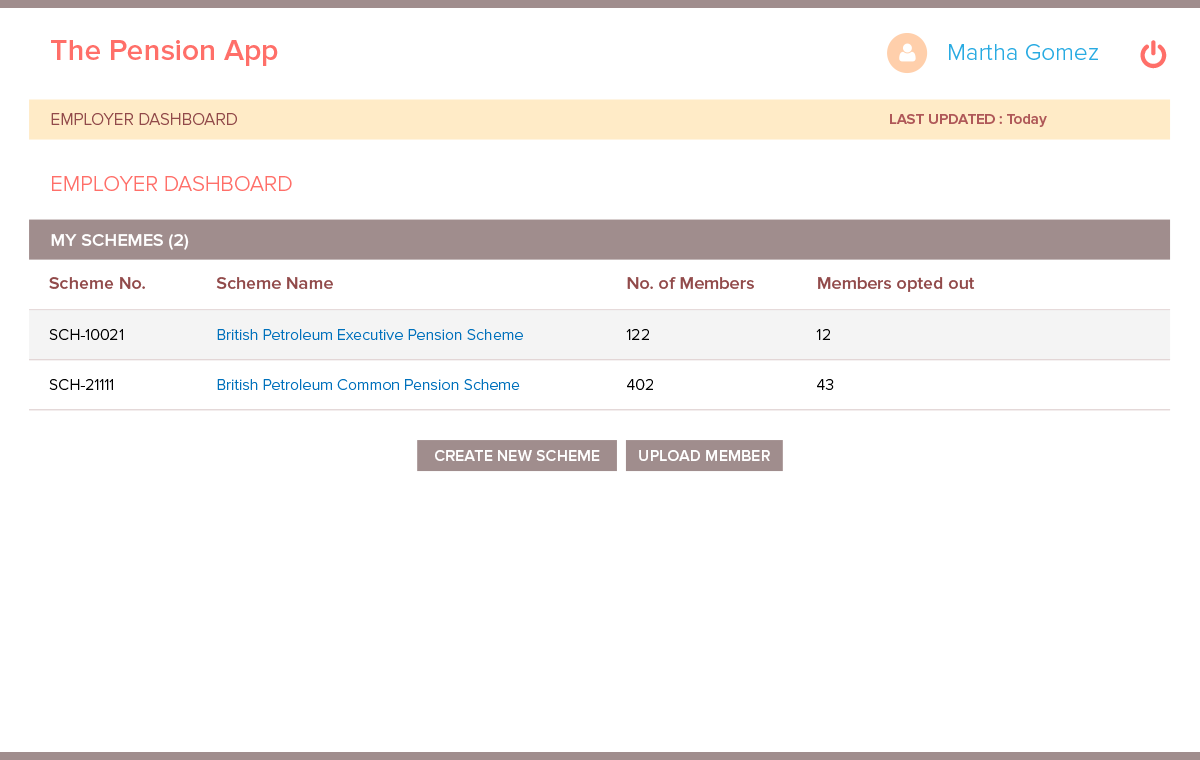
<style>
.page{position:relative;width:1200px;height:760px;background:#ffffff}
.page>*{position:absolute;margin:0}
.t1{font:30px "ProximaNova-Semibold";color:#ff6f69}
.t2{font:24px "ProximaNova-Light";color:#29abe2}
.t3{font:17px "ProximaNova-Light";color:#914a4a}
.t4{font:15px "ProximaNova-Semibold";color:#af5858}
.t5{font:22px "ProximaNova-Light";color:#ff6f69}
.t6{font:18px "ProximaNova-Semibold";color:#ffffff}
.t7{font:18px "ProximaNova-Semibold";color:#914a4a}
.t8{font:17.1px "ProximaNova-Semibold";color:#914a4a;scale:1.05 1}
.t9{font:16px "ProximaNova-Light";color:#000000}
.t10{font:16px "ProximaNova-Light";color:#0071bc}
.t11{font:16px "ProximaNova-Semibold";color:#ffffff}
</style>
<div class="page">
<p class="t1" style="left:51px;top:40px;width:227px;height:26px">The Pension App</p>
<p class="t2" style="left:949px;top:44px;width:149px;height:16px">Martha Gomez</p>
<p class="t3" style="left:51px;top:113px;width:186px;height:12px">EMPLOYER DASHBOARD</p>
<p class="t4" style="left:890px;top:114px;width:157px;height:13px">LAST UPDATED : Today</p>
<p class="t5" style="left:52px;top:176px;width:240px;height:15px">EMPLOYER DASHBOARD</p>
<p class="t6" style="left:51px;top:234px;width:138px;height:16px">MY SCHEMES (2)</p>
<p class="t7" style="left:49px;top:277px;width:96px;height:12px">Scheme No.</p>
<p class="t8" style="left:216px;top:277px;width:117px;height:12px">Scheme Name</p>
<p class="t8" style="left:627px;top:277px;width:127px;height:12px">No. of Members</p>
<p class="t8" style="left:818px;top:277px;width:157px;height:15px">Members opted out</p>
<p class="t9" style="left:49px;top:329px;width:74px;height:11px">SCH-10021</p>
<p class="t10" style="left:217px;top:329px;width:306px;height:11px">British Petroleum Executive Pension Scheme</p>
<p class="t9" style="left:626px;top:329px;width:23px;height:11px">122</p>
<p class="t9" style="left:816px;top:329px;width:14px;height:11px">12</p>
<p class="t9" style="left:49px;top:379px;width:64px;height:11px">SCH-21111</p>
<p class="t10" style="left:217px;top:379px;width:303px;height:11px">British Petroleum Common Pension Scheme</p>
<p class="t9" style="left:627px;top:379px;width:26px;height:11px">402</p>
<p class="t9" style="left:817px;top:379px;width:17px;height:11px">43</p>
<p class="t11" style="left:435px;top:450px;width:165px;height:11px">CREATE NEW SCHEME</p>
<p class="t11" style="left:639px;top:450px;width:131px;height:11px">UPLOAD MEMBER</p>
</div>
